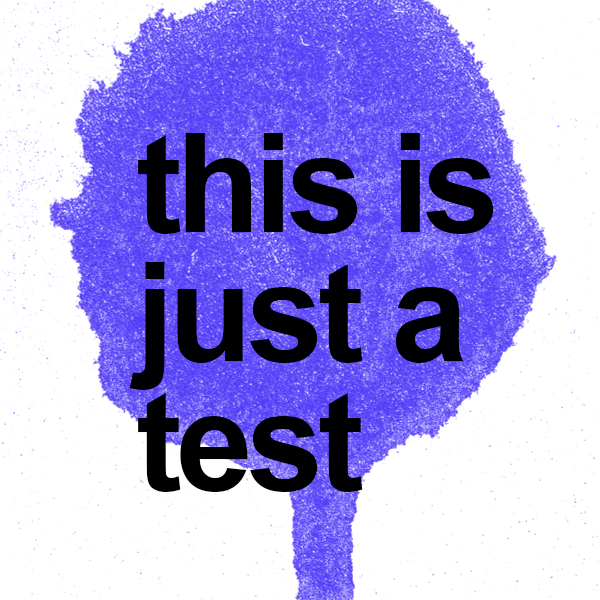
<style>
.page{position:relative;width:600px;height:600px;background:#ffffff}
.page>*{position:absolute;margin:0}
.t1{font:137.5px/129.2px "Arial-BoldMT";letter-spacing:-0.04em;color:#000000}
</style>
<div class="page">
<p class="t1" style="left:129px;top:133px;width:365px;height:359px">this is<br>just a<br>test</p>
</div>
